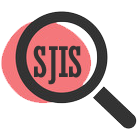
<style>
.page{position:relative;width:140px;height:140px;background:#ffffff}
.page>*{position:absolute;margin:0}
.t1{font:41.7px "Rockwell-Condensed";letter-spacing:0.02em;color:#333333}
</style>
<div class="page">
<p class="t1" style="left:33px;top:45px;width:49px;height:40px">SJIS</p>
</div>
